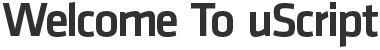
<style>
.page{position:relative;width:380px;height:50px;background:#ffffff}
.page>*{position:absolute;margin:0}
.t1{font:49px "Klavika-Medium";letter-spacing:-0.035em;color:#313131}
</style>
<div class="page">
<p class="t1" style="left:2px;top:2px;width:376px;height:45px">Welcome To uScript</p>
</div>
